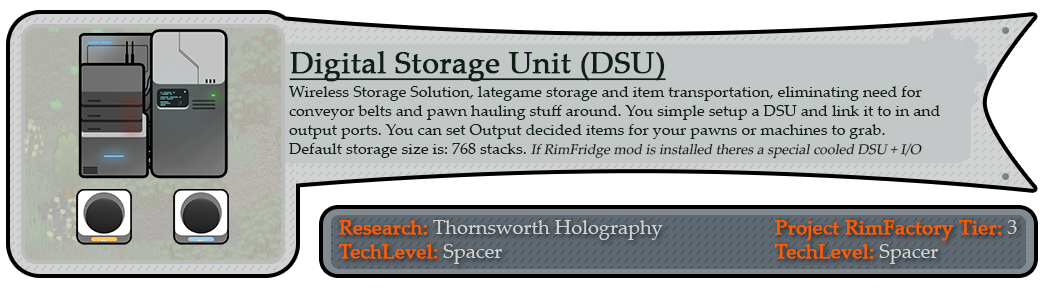
<style>
.page{position:relative;width:1048px;height:288px;background:#ffffff}
.page>*{position:absolute;margin:0}
.t1{font:30px "PalatinoLinotype-Roman";color:#0e2012;font-weight:bold;text-decoration:underline}
.t2{font:16px "PalatinoLinotype-Roman";color:#0e2012}
.t3{font:14px "PalatinoLinotype-Roman";color:#0e2012;font-style:italic}
.t4{font:20px "PalatinoLinotype-Roman";color:#d1d4d3}
.t5{font:20px "PalatinoLinotype-Roman";color:#fc5c00;font-weight:bold}
</style>
<div class="page">
<p class="t1" style="left:289px;top:51px;width:377px;height:31px">Digital Storage Unit (DSU)</p>
<p class="t2" style="left:289px;top:86px;width:651px;height:73px">Wireless Storage Solution, lategame storage and item transportation, eliminating need for conveyor belts and pawn hauling stuff around. You simple setup a DSU and link it to in and output ports. You can set Output decided items for your pawns or machines to grab.<br>Default storage size is: 768 stacks. <span class="t3">If RimFridge mod is installed theres a special cooled DSU + I/O</span></p>
<p class="t4" style="left:339px;top:220px;width:324px;height:44px"><span class="t5">Research: </span>Thornsworth Holography<br><span class="t5">TechLevel: </span>Spacer</p>
<p class="t5" style="left:775px;top:220px;width:242px;height:44px">Project RimFactory Tier: <span class="t4">3<br></span>TechLevel: <span class="t4">Spacer</span></p>
</div>
